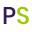
<style>
.page{position:relative;width:32px;height:32px;background:#ffffff}
.page>*{position:absolute;margin:0}
.t1{font:24px "Poppins-Medium";color:#381957}
.t2{font:24px "Poppins-Medium";color:#9dc707}
</style>
<div class="page">
<p class="t1" style="left:3px;top:6px;width:26px;height:19px">P<span class="t2">S</span></p>
</div>
